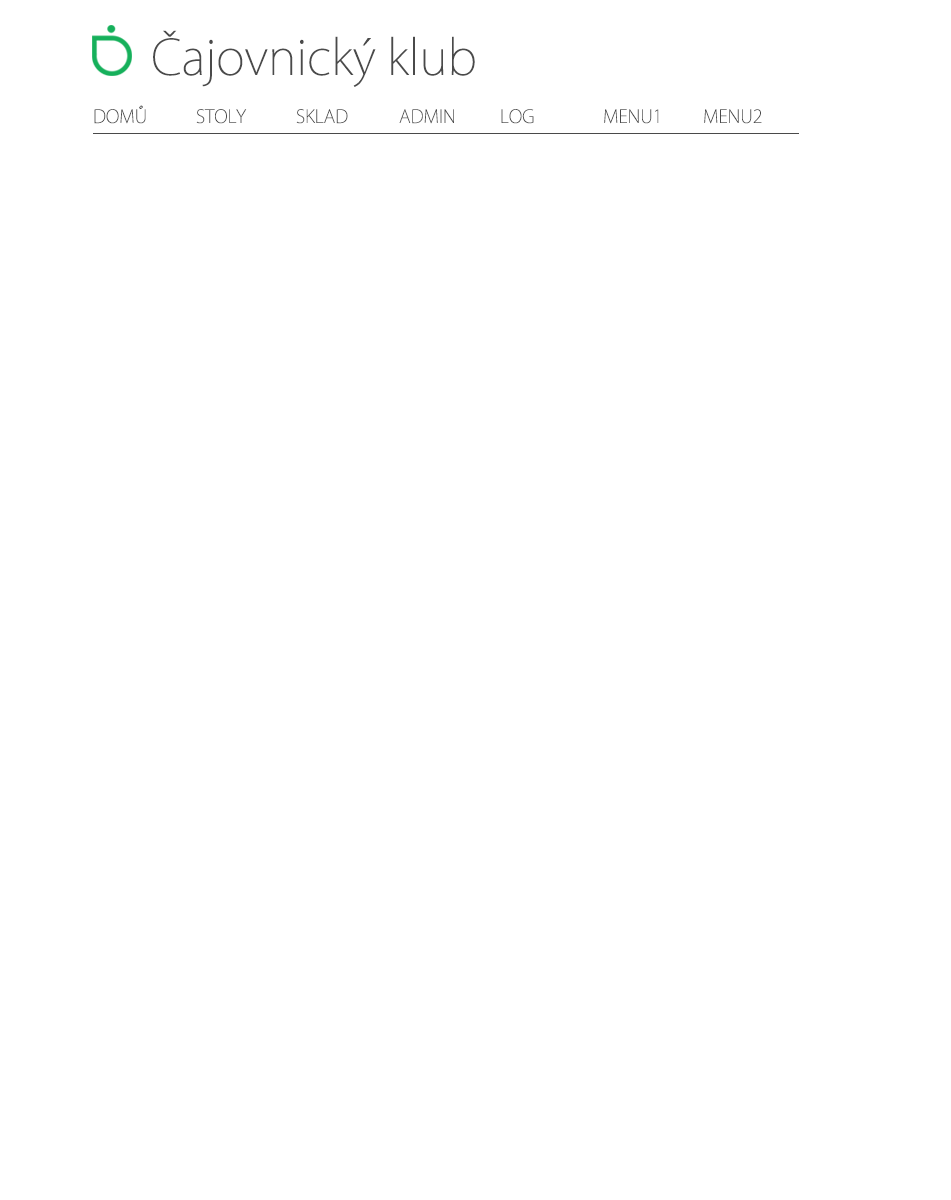
<style>
.page{position:relative;width:951px;height:1200px;background:#ffffff}
.page>*{position:absolute;margin:0}
.t1{font:48px "KozGoPr6N-ExtraLight";color:#4a4a4a}
.t2{font:18px "KozGoPr6N-ExtraLight";color:#4a4a4a;text-transform:uppercase}
</style>
<div class="page">
<p class="t1" style="left:153px;top:30px;width:322px;height:57px">Čajovnický klub</p>
<p class="t2" style="left:94px;top:105px;width:52px;height:19px">DOMŮ</p>
<p class="t2" style="left:196px;top:109px;width:51px;height:15px">STOLY</p>
<p class="t2" style="left:296px;top:109px;width:52px;height:15px">SKLAD</p>
<p class="t2" style="left:399px;top:109px;width:55px;height:15px">ADMIN</p>
<p class="t2" style="left:501px;top:109px;width:33px;height:15px">LOG</p>
<p class="t2" style="left:604px;top:109px;width:55px;height:15px">MENU1</p>
<p class="t2" style="left:704px;top:109px;width:58px;height:15px">MENU2</p>
</div>
